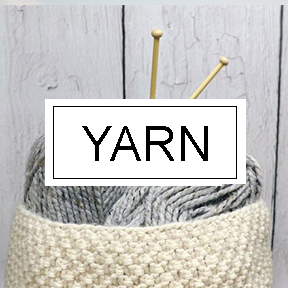
<style>
.page{position:relative;width:288px;height:288px}
.page>*{position:absolute;margin:0}
.t1{font:48px "ArialMT";color:#000000}
</style>
<div class="page">
<p class="t1" style="left:82px;top:126px;width:126px;height:35px">YARN</p>
</div>
